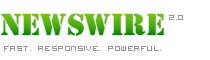
<style>
.page{position:relative;width:210px;height:60px;background:#ffffff}
.page>*{position:absolute;margin:0}
.t1{font:32px "Stencil"}
.t2{font:14px "VisitorTT2BRK";color:#999999}
</style>
<div class="page">
<p class="t1" style="left:1px;top:13px;width:163px;height:23px">Newswire</p>
<p class="t2" style="left:169px;top:15px;width:14px;height:5px">2.0</p>
<p class="t2" style="left:4px;top:46px;width:157px;height:5px">fast. responsive. powerful.</p>
</div>
